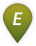
<style>
.page{position:relative;width:36px;height:46px;background:#ffffff}
.page>*{position:absolute;margin:0}
.t1{font:18px "SimHei";letter-spacing:0.26em;color:#ffffff;font-weight:bold;font-style:italic}
</style>
<div class="page">
<p class="t1" style="left:13px;top:12px;width:10px;height:13px">E</p>
</div>
